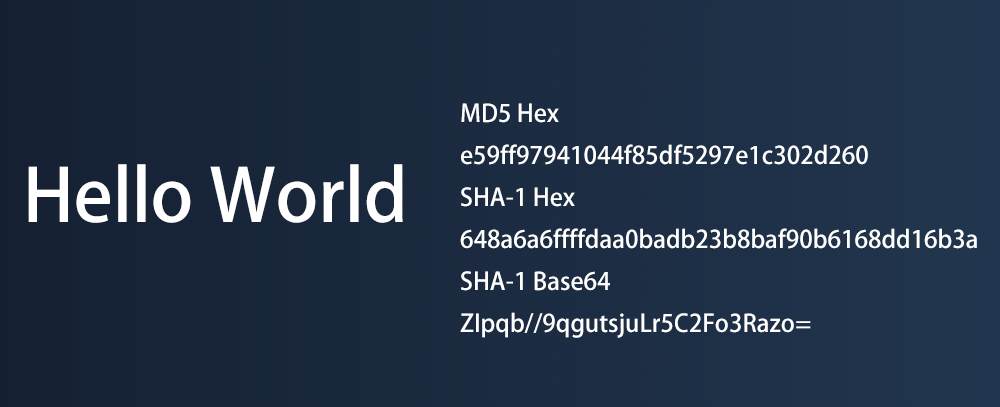
<style>
.page{position:relative;width:1000px;height:407px}
.page>*{position:absolute;margin:0}
.t1{font:24px "AdobeHeitiStd-Regular";color:#ffffff}
.t2{font:72px "AdobeHeitiStd-Regular";color:#ffffff}
</style>
<div class="page">
<p class="t1" style="left:460px;top:103px;width:517px;height:235px">MD5 Hex<br>e59ff97941044f85df5297e1c302d260<br>SHA-1 Hex<br>648a6a6ffffdaa0badb23b8baf90b6168dd16b3a<br>SHA-1 Base64<br>ZIpqb//9qgutsjuLr5C2Fo3Razo=</p>
<p class="t2" style="left:28px;top:164px;width:375px;height:59px">Hello World</p>
</div>
